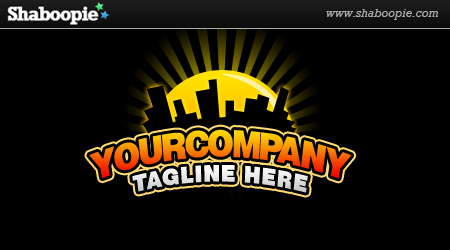
<style>
.page{position:relative;width:450px;height:250px;background:#000000}
.page>*{position:absolute;margin:0}
.t1{font:37.2px "Helvetica-Black";letter-spacing:-0.075em;scale:0.67 1}
.t2{font:22.9px "Helvetica-Black";letter-spacing:0.05em;color:#e8e8e8;scale:0.67 1}
</style>
<div class="page">
<p class="t1" style="left:89px;top:129px;width:263px;height:50px">YOURCOMPANY</p>
<p class="t2" style="left:132px;top:165px;width:176px;height:28px">TAGLINE HERE</p>
</div>
